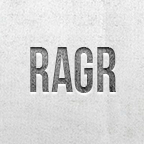
<style>
.page{position:relative;width:144px;height:144px}
.page>*{position:absolute;margin:0}
.t1{font:63.7px "BebasNeue";letter-spacing:0.005em;scale:0.86 1}
</style>
<div class="page">
<p class="t1" style="left:30px;top:47px;width:86px;height:46px">RAGR</p>
<p class="t1" style="left:30px;top:47px;width:86px;height:46px">RAGR</p>
</div>
